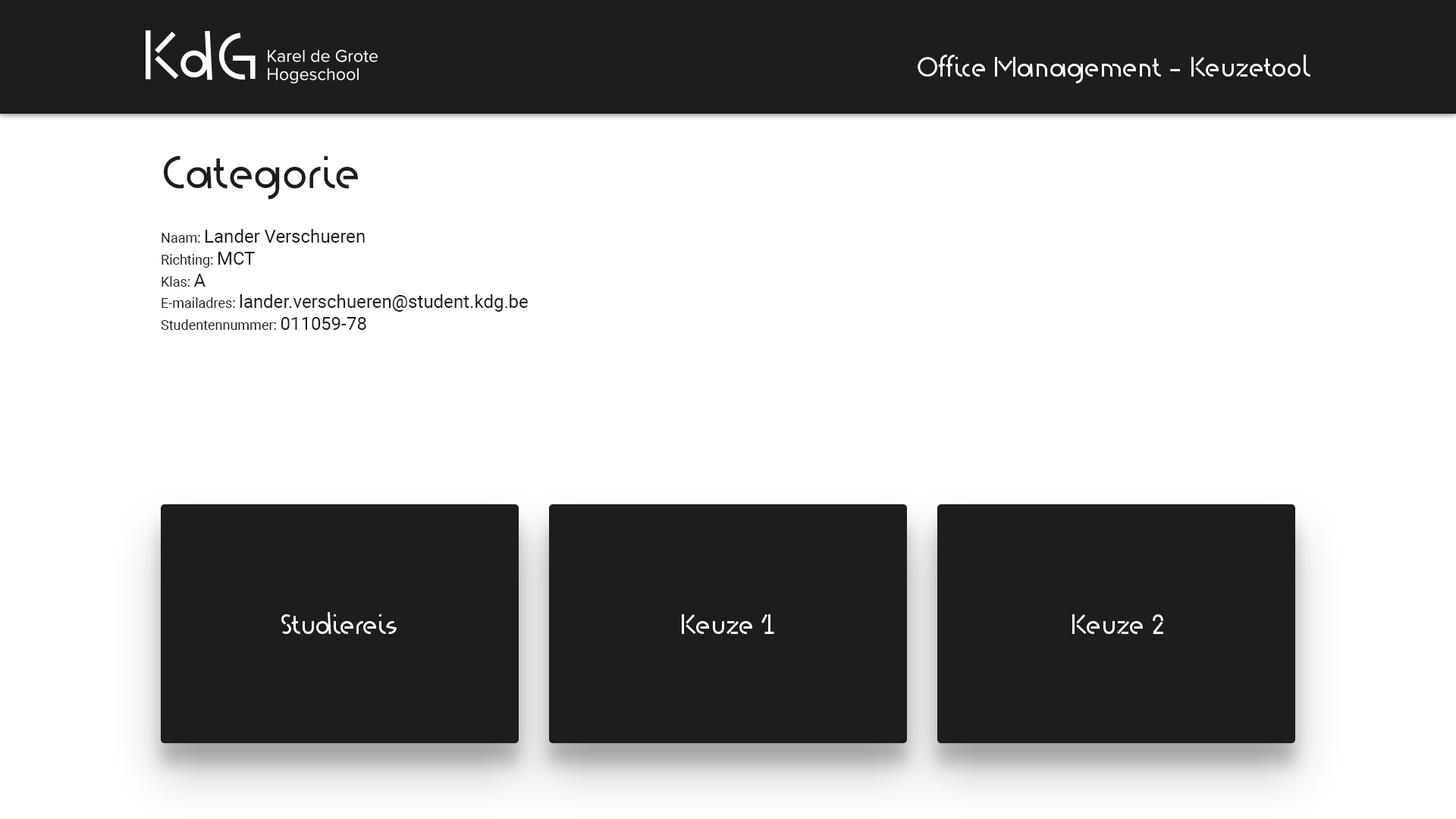
<style>
.page{position:relative;width:1456px;height:819px;background:#ffffff}
.page>*{position:absolute;margin:0}
.t1{font:27.3px "KdG-Regular";color:#fefefe}
.t2{font:18.2px "Roboto-Regular";color:#1d1d1b}
.t3{font:45.5px "KdGRegular";color:#1d1d1b}
.t4{font:13.6px "Roboto-Regular";color:#1d1d1b}
</style>
<div class="page">
<p class="t1" style="left:918px;top:55px;width:392px;height:28px">Office Management - Keuzetool</p>
<p class="t2" style="left:161px;top:155px;width:367px;height:175px"><span class="t3">Categorie<br><br></span><span class="t4">Naam: </span>Lander Verschueren<br><span class="t4">Richting: </span>MCT<br><span class="t4">Klas: </span>A<br><span class="t4">E-mailadres: </span>lander.verschueren@student.kdg.be<br><span class="t4">Studentennummer: </span>011059-78</p>
<p class="t1" style="left:281px;top:612px;width:116px;height:22px">Studiereis</p>
<p class="t1" style="left:682px;top:614px;width:92px;height:20px">Keuze 1</p>
<p class="t1" style="left:1072px;top:614px;width:91px;height:20px">Keuze 2</p>
</div>
